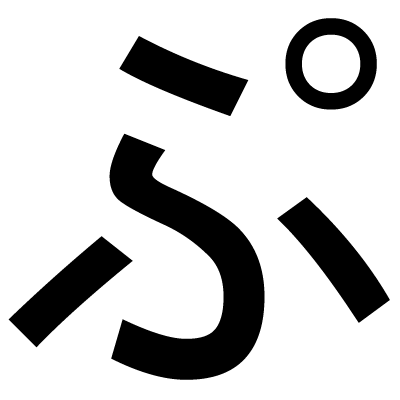
<style>
.page{position:relative;width:400px;height:400px;background:#ffffff}
.page>*{position:absolute;margin:0}
.t1{font:416.7px "MS-PGothic";color:#000000}
</style>
<div class="page">
<p class="t1" style="left:8px;top:18px;width:382px;height:362px">ぷ</p>
</div>
